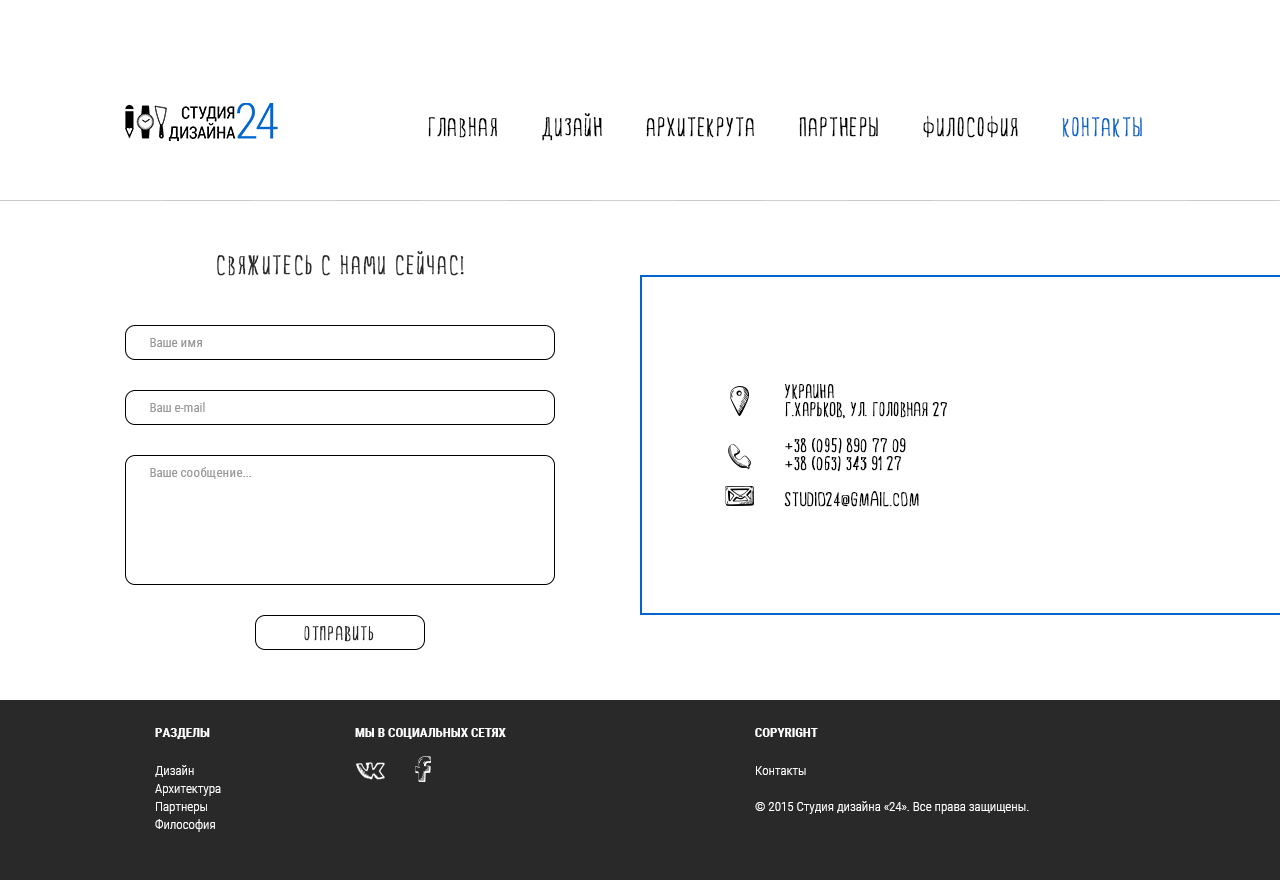
<style>
.page{position:relative;width:1280px;height:880px;background:#ffffff}
.page>*{position:absolute;margin:0}
.t1{font:24px "FiveMinutes";letter-spacing:0.025em;color:#000000;text-transform:uppercase;font-weight:bold}
.t2{font:24px "FiveMinutes";letter-spacing:0.025em;color:#0066cc;text-transform:uppercase;font-weight:bold}
.t3{font:24px "FiveMinutes";letter-spacing:0.05em;color:#292929;text-transform:uppercase;font-weight:bold}
.t4{font:13px "RobotoCondensed-Regular";color:#999999}
.t5{font:18px/18px "FiveMinutes";color:#000000;text-transform:uppercase;font-weight:bold}
.t6{font:18px "FiveMinutes";letter-spacing:0.05em;color:#292929;text-transform:uppercase;font-weight:bold}
.t7{font:13px "RobotoCondensed-Bold";color:#ffffff;text-transform:uppercase}
.t8{font:13px/18px "RobotoCondensed-Light";color:#ffffff}
</style>
<div class="page">
<p class="t1" style="left:428px;top:113px;width:714px;height:28px">главная       Дизайн       Архитекрута       ПАРТНЕРЫ       философия       <span class="t2">контакты</span></p>
<p class="t3" style="left:217px;top:251px;width:247px;height:25px">Свяжитесь с нами сейчас!</p>
<p class="t4" style="left:150px;top:338px;width:52px;height:9px">Ваше имя</p>
<p class="t5" style="left:784px;top:384px;width:164px;height:123px">Украина <br>г.Харьков, ул. Головная 27 <br><br>+38 (095) 890 77 09<br>+38 (063) 343 91 27 <br><br>studio24@gmail.com</p>
<p class="t4" style="left:150px;top:402px;width:55px;height:10px">Ваш e-mail</p>
<p class="t4" style="left:150px;top:467px;width:101px;height:12px">Ваше сообщение...</p>
<p class="t6" style="left:304px;top:626px;width:70px;height:16px">отправить</p>
<p class="t7" style="left:155px;top:728px;width:55px;height:11px">Разделы</p>
<p class="t7" style="left:355px;top:728px;width:151px;height:11px">Мы в социальных сетях</p>
<p class="t7" style="left:755px;top:728px;width:63px;height:9px">COPYRIGHT</p>
<p class="t8" style="left:155px;top:765px;width:66px;height:67px;text-align:justify">Дизайн <br>Архитектура<br>Партнеры<br>Философия</p>
<p class="t8" style="left:755px;top:766px;width:274px;height:48px;text-align:justify">Контакты<br><br>© 2015 Студия дизайна «24». Все права защищены.</p>
</div>
